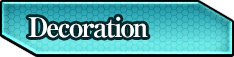
<style>
.page{position:relative;width:234px;height:57px}
.page>*{position:absolute;margin:0}
.t1{font:27px "RyuminPro-ExBold";letter-spacing:-0.08em;color:#ffffff}
</style>
<div class="page">
<p class="t1" style="left:28px;top:16px;width:120px;height:22px">Decoration</p>
</div>
